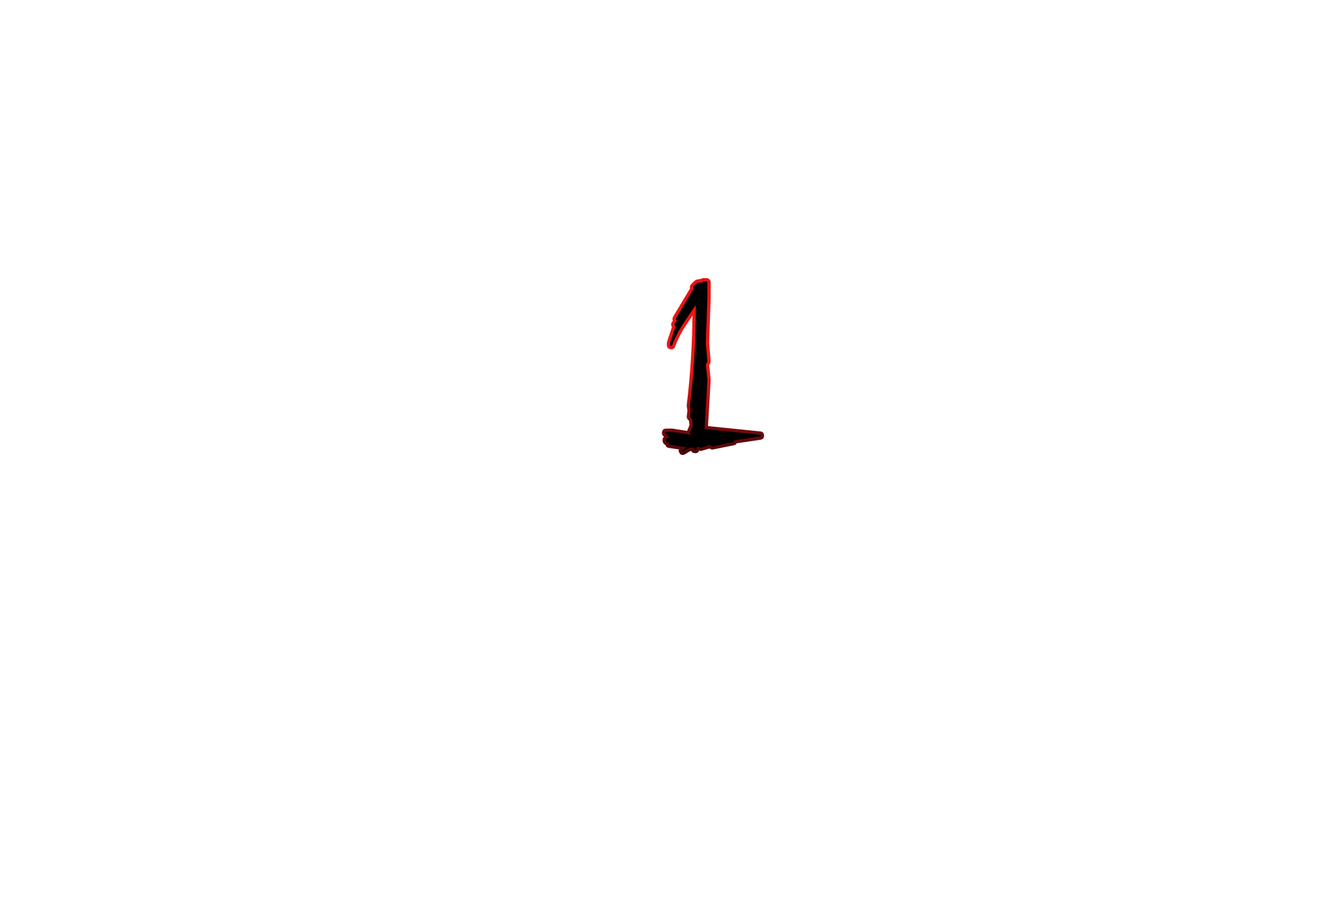
<style>
.page{position:relative;width:1328px;height:898px;background:#ffffff}
.page>*{position:absolute;margin:0}
.t1{font:199.3px "onryou";color:#000000;font-weight:bold}
</style>
<div class="page">
<p class="t1" style="left:665px;top:281px;width:97px;height:171px">１</p>
</div>
